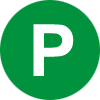
<style>
.page{position:relative;width:100px;height:100px;background:#00923d}
.page>*{position:absolute;margin:0}
.t1{font:72px "Arial-BoldMT";letter-spacing:0.1em;color:#ffffff;text-transform:uppercase}
</style>
<div class="page">
<p class="t1" style="left:33px;top:24px;width:41px;height:52px">p</p>
</div>
